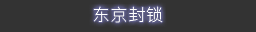
<style>
.page{position:relative;width:256px;height:32px;background:#333333}
.page>*{position:absolute;margin:0}
.t1{font:17px "NotoSansSC-Thin";letter-spacing:0.06em;color:#ffffff}
</style>
<div class="page">
<p class="t1" style="left:93px;top:6px;width:70px;height:17px">东京封锁</p>
</div>
